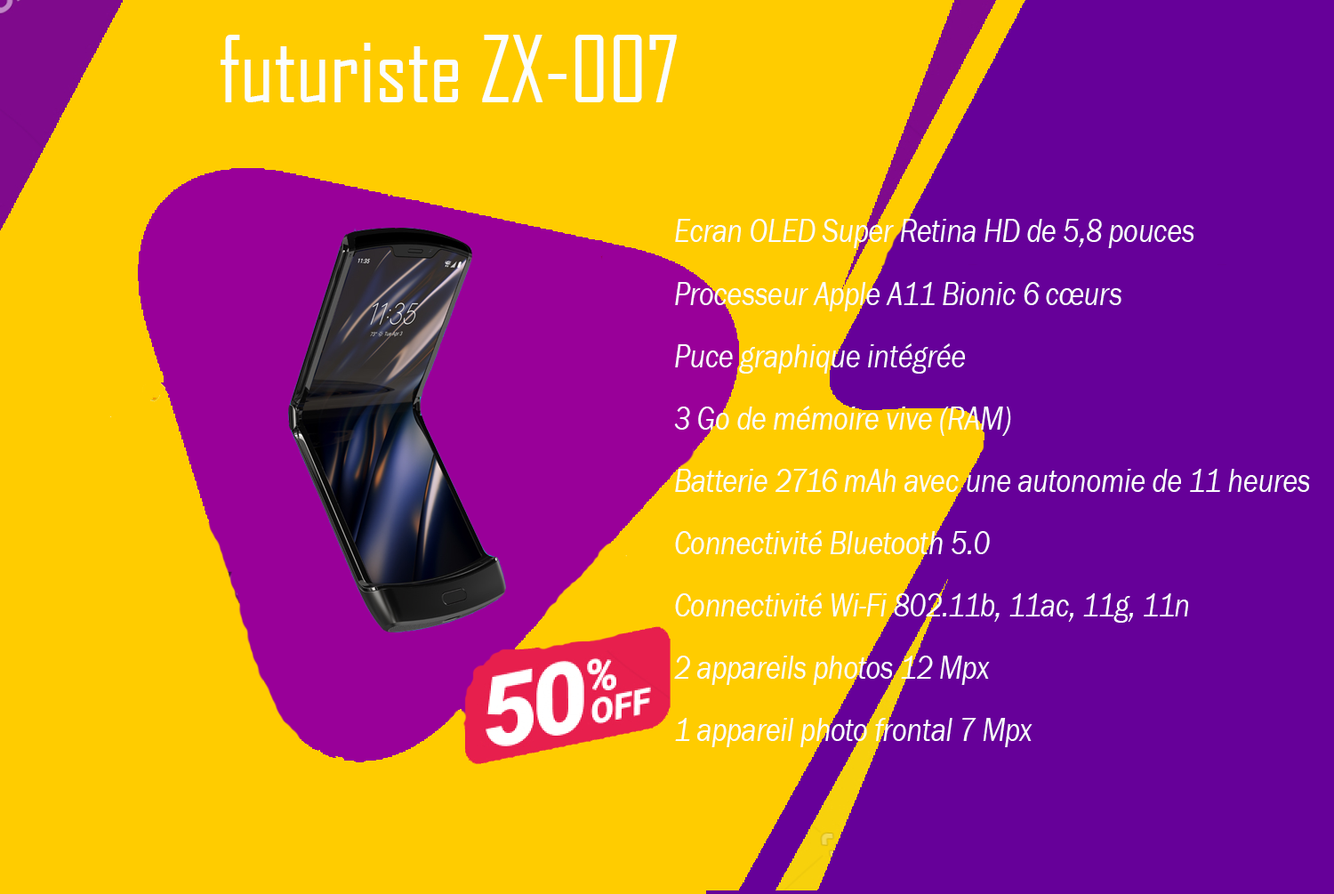
<style>
.page{position:relative;width:1334px;height:894px;background:#ffcc00}
.page>*{position:absolute;margin:0}
.t1{font:88.9px "AgencyFB-Reg";color:#fbfdfd}
.t2{font:34.6px/62.3px "FranklinGothic-BookItalic";color:#fbfdfd;scale:0.81 1}
</style>
<div class="page">
<p class="t1" style="left:221px;top:35px;width:456px;height:67px">futuriste ZX-007</p>
<p class="t2" style="left:674px;top:219px;width:636px;height:528px">Ecran OLED Super Retina HD de 5,8 pouces <br>Processeur Apple A11 Bionic 6 cœurs <br>Puce graphique intégrée <br>3 Go de mémoire vive (RAM) <br>Batterie 2716 mAh avec une autonomie de 11 heures <br>Connectivité Bluetooth 5.0 <br>Connectivité Wi-Fi 802.11b, 11ac, 11g, 11n <br>2 appareils photos 12 Mpx <br>1 appareil photo frontal 7 Mpx</p>
</div>
